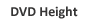
<style>
.page{position:relative;width:88px;height:23px;background:#ffffff}
.page>*{position:absolute;margin:0}
.t1{font:14px "Calibri-Bold";color:#363535}
</style>
<div class="page">
<p class="t1" style="left:11px;top:6px;width:67px;height:13px">DVD Height</p>
</div>
